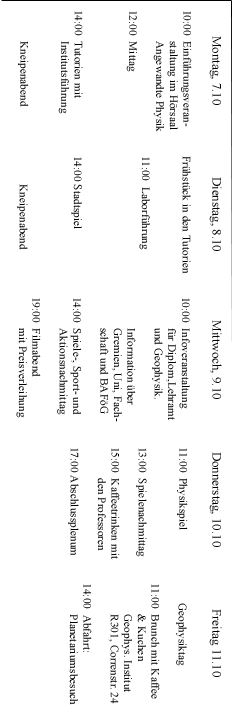
<style>
.page{position:relative;width:232px;height:716px;background:#ffffff}
.page>*{position:absolute;margin:0}
.t1{font:11.3px "TimesNewRomanPSMT";color:#000000}
.t2{font:12.9px "TimesNewRomanPSMT";color:#000000}
</style>
<div class="page">
<p class="t1" style="left:18px;top:11px;width:174px;height:121px;rotate:90deg">10:00  Einführungsveran-<br>           staltung im Hörsaal <br>           Angewandte Physik<br><br>12:00  Mittag<br><br><br><br>14:00  Tutorien mit <br>           Institutsführung<br><br><br>           Kneipenabend</p>
<p class="t2" style="left:209px;top:36px;width:13px;height:641px;rotate:90deg">Montag, 7.10                      Dienstag, 8.10                     Mittwoch, 9.10                Donnerstag, 10.10                   Freitag 11.10</p>
<p class="t1" style="left:17px;top:156px;width:174px;height:118px;rotate:90deg">Frühstück in den Tutorien<br><br><br>11:00  Laborführung<br><br><br><br><br>14:00 Stadtspiel<br><br><br><br>          Kneipenabend</p>
<p class="t1" style="left:16px;top:298px;width:174px;height:124px;rotate:90deg">10:00  Infoveranstaltung<br>           für Diplom,Lehramt<br>           und Geophysik.<br><br>           Information über <br>           Gremien, Uni, Fach-<br>           schaft und BAFöG<br><br>14:00  Spiele-, Sport- und <br>           Aktionsnachmittag<br><br>19:00  Filmabend<br>           mit Preisverleihung</p>
<p class="t1" style="left:68px;top:448px;width:120px;height:112px;rotate:90deg">11:00  Physikspiel<br><br><br>13:00  Spielenachmittag<br>          <br>15:00  Kaffeetrinken mit <br>           den Professoren<br><br>17:00 Abschlussplenum</p>
<p class="t1" style="left:69px;top:584px;width:118px;height:121px;rotate:90deg">Geophysiktag<br><br>11:00  Brunch mit Kaffee<br>           &amp; Kuchen<br>           Geophys. Institut<br>           R301, Correnstr. 24<br><br>14:00  Abfahrt: <br>           Planetariumsbesuch</p>
</div>
